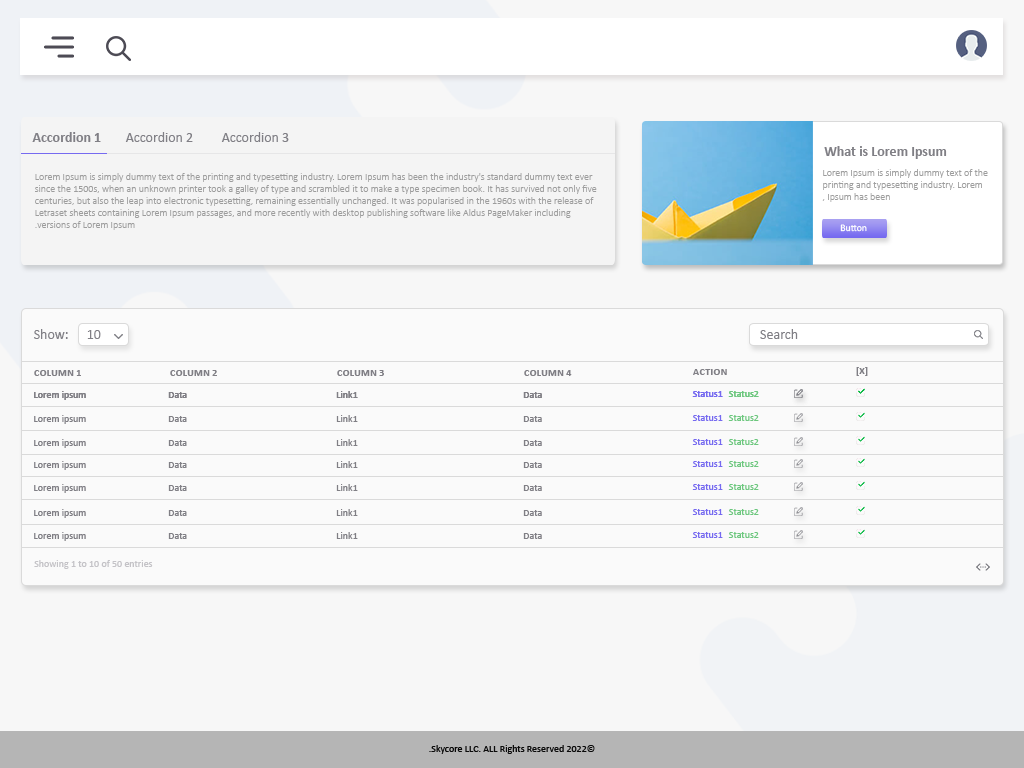
<style>
.page{position:relative;width:1024px;height:768px;background:#fafafa}
.page>*{position:absolute;margin:0}
.t1{font:14px "Calibri-Bold";color:#807f85}
.t2{font:14px "Calibri";color:#807f85}
.t3{font:10px "Calibri-Light";color:#9d9d9d}
.t4{font:10px "Calibri";color:#ffffff}
.t5{font:10px "Calibri-Bold";color:#807f85;text-transform:uppercase}
.t6{font:10px "Calibri";color:#807f85}
.t7{font:10px "Calibri";color:#766af0}
.t8{font:10px "Calibri";color:#6dc77e}
.t9{font:10px "Calibri";color:#c4c3c7}
.t10{font:10px "Calibri";color:#0a0a0a}
</style>
<div class="page">
<p class="t1" style="left:32px;top:132px;width:69px;height:10px">Accordion 1</p>
<p class="t2" style="left:125px;top:132px;width:68px;height:10px">Accordion 2</p>
<p class="t2" style="left:221px;top:132px;width:68px;height:10px">Accordion 3</p>
<p class="t1" style="left:824px;top:146px;width:123px;height:13px">What is Lorem Ipsum</p>
<p class="t3" style="left:35px;top:173px;width:562px;height:57px;text-align:right">Lorem Ipsum is simply dummy text of the printing and typesetting industry. Lorem Ipsum has been the industry's standard dummy text ever since the 1500s, when an unknown printer took a galley of type and scrambled it to make a type specimen book. It has survived not only five centuries, but also the leap into electronic typesetting, remaining essentially unchanged. It was popularised in the 1960s with the release of Letraset sheets containing Lorem Ipsum passages, and more recently with desktop publishing software like Aldus PageMaker including versions of Lorem Ipsum.</p>
<p class="t3" style="left:822px;top:169px;width:166px;height:33px;text-align:right">Lorem Ipsum is simply dummy text of the<br>printing and typesetting industry. Lorem<br>Ipsum has been ,</p>
<p class="t4" style="left:840px;top:224px;width:27px;height:8px">Button</p>
<p class="t2" style="left:34px;top:329px;width:34px;height:10px">:Show</p>
<p class="t2" style="left:760px;top:329px;width:38px;height:10px">Search</p>
<p class="t2" style="left:87px;top:330px;width:14px;height:9px">10</p>
<p class="t5" style="left:34px;top:370px;width:47px;height:6px">Column 1</p>
<p class="t5" style="left:170px;top:370px;width:47px;height:6px">Column 2</p>
<p class="t5" style="left:337px;top:370px;width:47px;height:6px">Column 3</p>
<p class="t5" style="left:524px;top:370px;width:48px;height:6px">Column 4</p>
<p class="t5" style="left:693px;top:369px;width:34px;height:6px">ACTION</p>
<p class="t5" style="left:856px;top:367px;width:12px;height:9px">[X]</p>
<p class="t6" style="left:34px;top:391px;width:52px;height:9px">Lorem ipsum</p>
<p class="t6" style="left:34px;top:391px;width:52px;height:9px">Lorem ipsum</p>
<p class="t6" style="left:168px;top:392px;width:19px;height:6px">Data</p>
<p class="t6" style="left:168px;top:392px;width:19px;height:6px">Data</p>
<p class="t6" style="left:336px;top:391px;width:22px;height:7px">Link1</p>
<p class="t6" style="left:336px;top:391px;width:22px;height:7px">Link1</p>
<p class="t6" style="left:523px;top:392px;width:19px;height:6px">Data</p>
<p class="t6" style="left:523px;top:392px;width:19px;height:6px">Data</p>
<p class="t7" style="left:692px;top:391px;width:31px;height:6px">Status1</p>
<p class="t7" style="left:692px;top:391px;width:31px;height:6px">Status1</p>
<p class="t8" style="left:728px;top:391px;width:31px;height:6px">Status2</p>
<p class="t8" style="left:728px;top:391px;width:31px;height:6px">Status2</p>
<p class="t6" style="left:34px;top:415px;width:52px;height:9px">Lorem ipsum</p>
<p class="t6" style="left:168px;top:416px;width:19px;height:6px">Data</p>
<p class="t6" style="left:336px;top:415px;width:22px;height:7px">Link1</p>
<p class="t6" style="left:523px;top:416px;width:19px;height:6px">Data</p>
<p class="t7" style="left:692px;top:415px;width:31px;height:6px">Status1</p>
<p class="t8" style="left:728px;top:415px;width:31px;height:6px">Status2</p>
<p class="t6" style="left:34px;top:439px;width:52px;height:9px">Lorem ipsum</p>
<p class="t6" style="left:168px;top:440px;width:19px;height:6px">Data</p>
<p class="t6" style="left:336px;top:439px;width:22px;height:7px">Link1</p>
<p class="t6" style="left:523px;top:440px;width:19px;height:6px">Data</p>
<p class="t7" style="left:692px;top:439px;width:31px;height:6px">Status1</p>
<p class="t8" style="left:728px;top:439px;width:31px;height:6px">Status2</p>
<p class="t6" style="left:34px;top:461px;width:52px;height:9px">Lorem ipsum</p>
<p class="t6" style="left:168px;top:462px;width:19px;height:6px">Data</p>
<p class="t6" style="left:336px;top:461px;width:22px;height:7px">Link1</p>
<p class="t6" style="left:523px;top:462px;width:19px;height:6px">Data</p>
<p class="t7" style="left:692px;top:461px;width:31px;height:6px">Status1</p>
<p class="t8" style="left:728px;top:461px;width:31px;height:6px">Status2</p>
<p class="t6" style="left:34px;top:484px;width:52px;height:9px">Lorem ipsum</p>
<p class="t6" style="left:168px;top:485px;width:19px;height:6px">Data</p>
<p class="t6" style="left:336px;top:484px;width:22px;height:7px">Link1</p>
<p class="t6" style="left:523px;top:485px;width:19px;height:6px">Data</p>
<p class="t7" style="left:692px;top:484px;width:31px;height:6px">Status1</p>
<p class="t8" style="left:728px;top:484px;width:31px;height:6px">Status2</p>
<p class="t6" style="left:34px;top:509px;width:52px;height:9px">Lorem ipsum</p>
<p class="t6" style="left:168px;top:510px;width:19px;height:6px">Data</p>
<p class="t6" style="left:336px;top:509px;width:22px;height:7px">Link1</p>
<p class="t6" style="left:523px;top:510px;width:19px;height:6px">Data</p>
<p class="t7" style="left:692px;top:509px;width:31px;height:6px">Status1</p>
<p class="t8" style="left:728px;top:509px;width:31px;height:6px">Status2</p>
<p class="t6" style="left:34px;top:532px;width:52px;height:9px">Lorem ipsum</p>
<p class="t6" style="left:168px;top:533px;width:19px;height:6px">Data</p>
<p class="t6" style="left:336px;top:532px;width:22px;height:7px">Link1</p>
<p class="t6" style="left:523px;top:533px;width:19px;height:6px">Data</p>
<p class="t7" style="left:692px;top:532px;width:31px;height:6px">Status1</p>
<p class="t8" style="left:728px;top:532px;width:31px;height:6px">Status2</p>
<p class="t9" style="left:34px;top:560px;width:119px;height:9px">Showing 1 to 10 of 50 entries</p>
<p class="t10" style="left:429px;top:745px;width:166px;height:9px">©2022 Skycore LLC. ALL Rights Reserved.</p>
</div>
